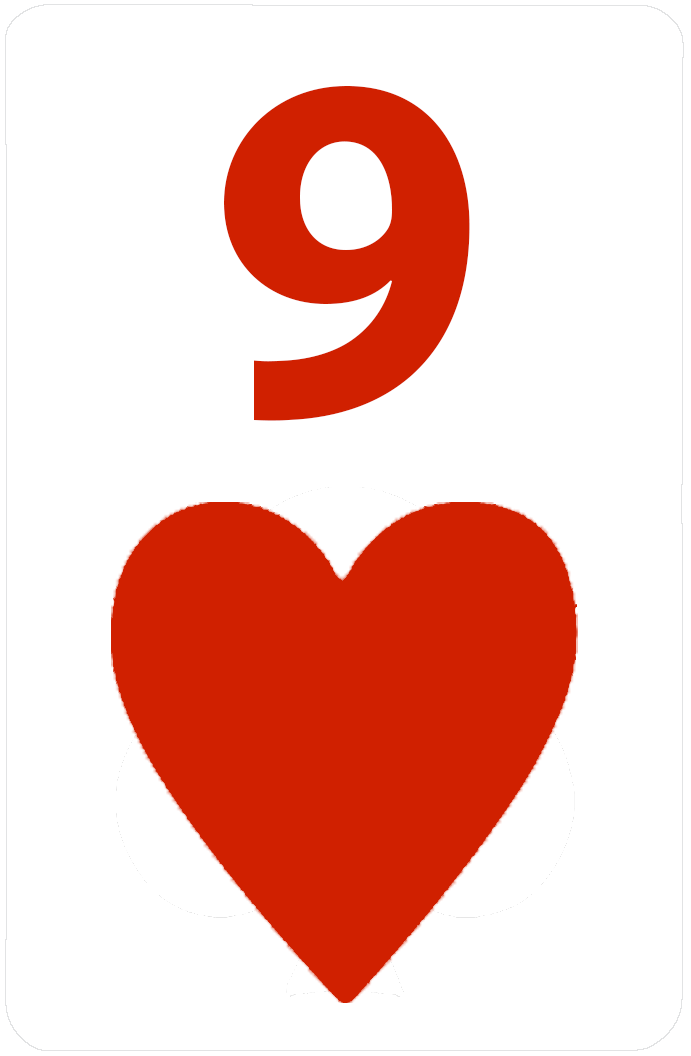
<style>
.page{position:relative;width:691px;height:1056px;background:#ffffff}
.page>*{position:absolute;margin:0}
.t1{font:500px "MyriadPro-Bold";color:#d02000}
</style>
<div class="page">
<p class="t1" style="left:224px;top:86px;width:246px;height:335px">9</p>
</div>
